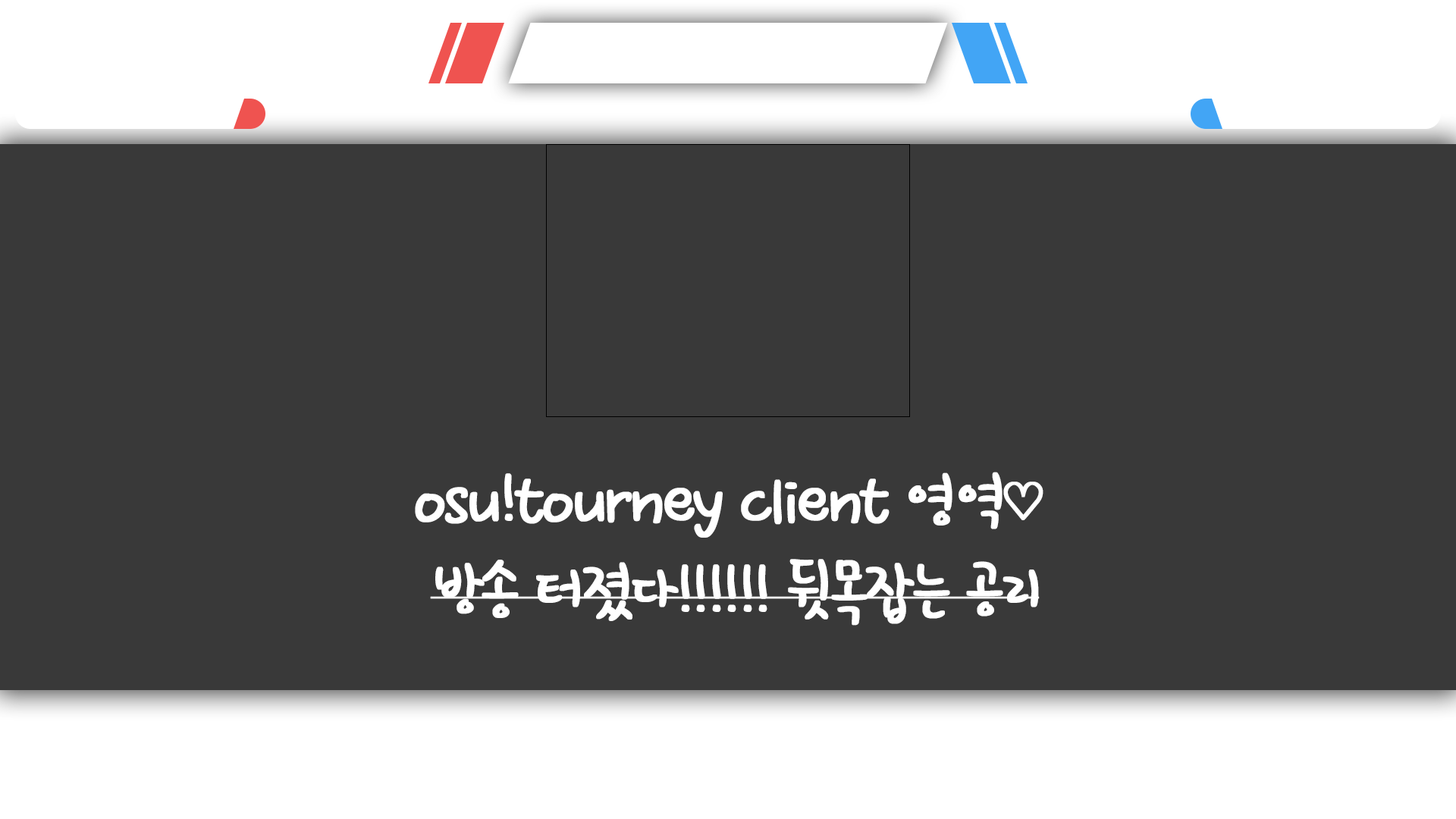
<style>
.page{position:relative;width:1456px;height:819px;background:#393939}
.page>*{position:absolute;margin:0}
.t1{font:75.8px "HoonWcatR";letter-spacing:-0.06em;color:#ffffff;font-weight:bold}
.t2{font:75.8px "D2Codingligature";letter-spacing:-0.06em;color:#ffffff;font-weight:bold}
</style>
<div class="page">
<p class="t1" style="left:415px;top:472px;width:628px;height:154px;text-align:center">osu!tourney client 영역<span class="t2">♡ <br></span>방송 터졌다!!!!!! 뒷목잡는 공리</p>
</div>
